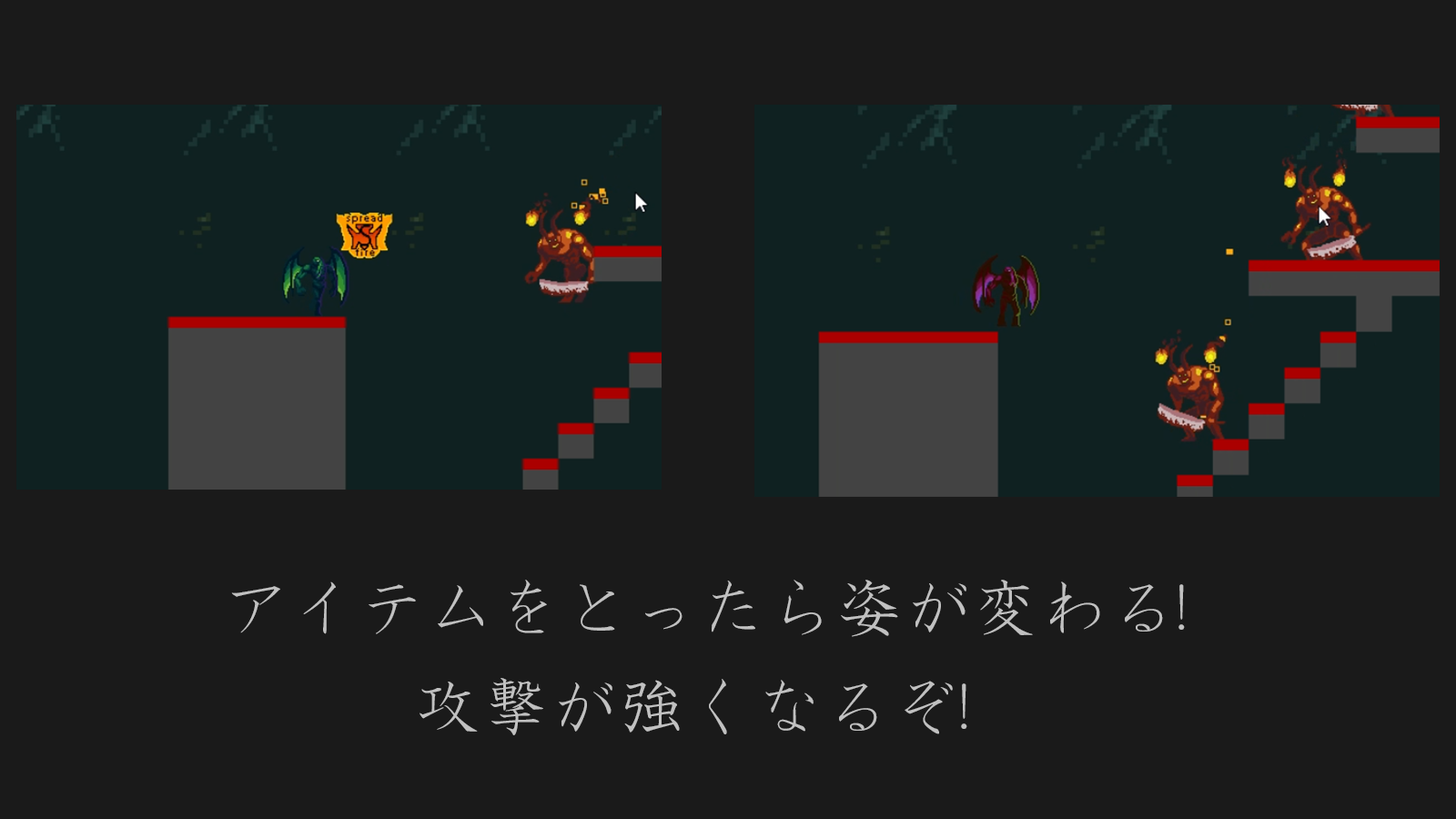
<style>
.page{position:relative;width:1456px;height:819px;background:#1a1a1a}
.page>*{position:absolute;margin:0}
.t1{font:68.2px "HGSKyokashotai";color:#c1c1c1}
</style>
<div class="page">
<p class="t1" style="left:231px;top:580px;width:954px;height:57px">アイテムをとったら姿が変わる!</p>
<p class="t1" style="left:420px;top:678px;width:547px;height:57px">攻撃が強くなるぞ!</p>
</div>
